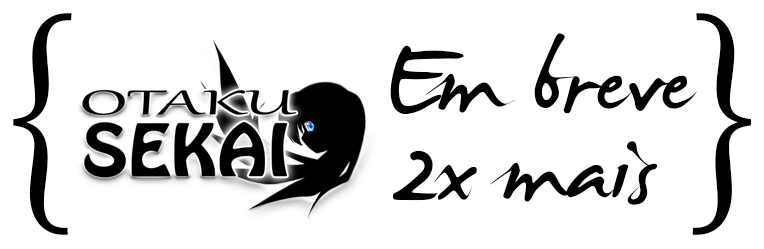
<style>
.page{position:relative;width:764px;height:249px;background:#ffffff}
.page>*{position:absolute;margin:0}
.t1{font:271px "Gabriola";color:#000000}
.t2{font:150px "JamesFajardo";color:#000000}
</style>
<div class="page">
<p class="t1" style="left:13px;top:13px;width:59px;height:222px">{</p>
<p class="t1" style="left:692px;top:13px;width:59px;height:222px">}</p>
<p class="t2" style="left:390px;top:33px;width:307px;height:82px">Em breve</p>
<p class="t2" style="left:393px;top:141px;width:265px;height:64px">2x mais</p>
</div>
